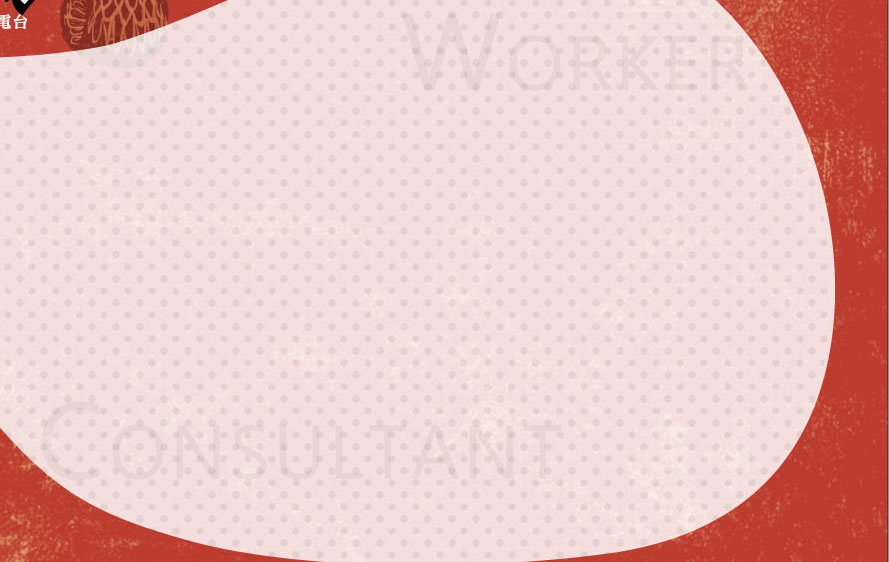
<style>
.page{position:relative;width:889px;height:562px}
.page>*{position:absolute;margin:0}
.t1{font:100px "MicrosoftJhengHeiRegular";letter-spacing:0.025em;color:#e9d5d4;font-variant:small-caps;font-weight:bold}
</style>
<div class="page">
<p class="t1" style="left:402px;top:13px;width:348px;height:78px">Worker</p>
<p class="t1" style="left:42px;top:401px;width:520px;height:80px">Consultant</p>
</div>
